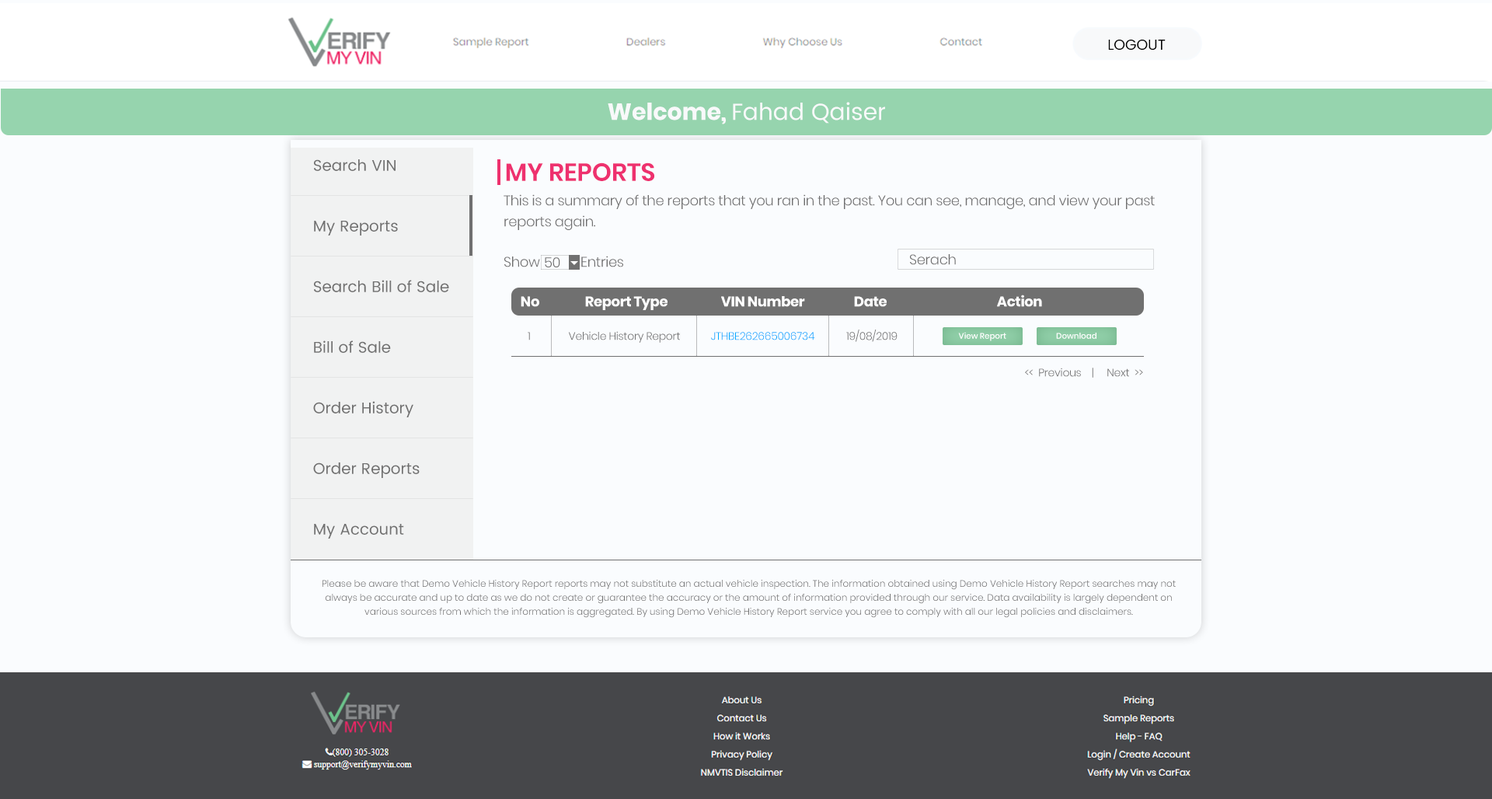
<style>
.page{position:relative;width:1492px;height:799px;background:#fafcfe}
.page>*{position:absolute;margin:0}
.t1{font:14.6px "Poppins-Regular";color:#000000}
.t2{font:23.3px "Poppins-Regular";color:#f8f9fa}
.t3{font:23.3px "Poppins";color:#f8f9fa}
.t4{font:15.5px "Poppins-Regular";color:#707070}
.t5{font:24.9px "Poppins-SemiBold";color:#ee316e}
.t6{font:14px/21px "Poppins-Light";letter-spacing:-0.02em;color:#707070}
.t7{font:14px "Poppins-Light";letter-spacing:-0.02em;color:#707070}
.t8{font:14px "Poppins";letter-spacing:-0.02em;color:#ffffff}
.t9{font:10.9px "Poppins-Light";letter-spacing:-0.02em;color:#707070}
.t10{font:10.9px "Poppins-Light";letter-spacing:-0.02em}
.t11{font:10.9px "Poppins-Light";letter-spacing:-0.02em;color:#00a8ff}
.t12{font:8.1px "Poppins-Medium";color:#ffffff}
.t13{font:9.3px/14px "Poppins-Light";color:#707070}
</style>
<div class="page">
<p class="t1" style="left:1108px;top:39px;width:58px;height:12px">LOGOUT</p>
<p class="t2" style="left:608px;top:102px;width:277px;height:22px"><span class="t3">Welcome, </span>Fahad Qaiser</p>
<p class="t4" style="left:314px;top:159px;width:82px;height:12px">Search VIN</p>
<p class="t5" style="left:506px;top:162px;width:148px;height:19px">MY REPORTS</p>
<p class="t6" style="left:504px;top:194px;width:651px;height:36px">This is a summary of the reports that you ran in the past. You can see, manage, and view your past reports again.</p>
<p class="t4" style="left:314px;top:221px;width:84px;height:15px">My Reports</p>
<p class="t7" style="left:504px;top:256px;width:119px;height:11px">Show             Entries</p>
<p class="t7" style="left:545px;top:257px;width:15px;height:10px">50</p>
<p class="t7" style="left:910px;top:254px;width:46px;height:11px">Serach</p>
<p class="t4" style="left:314px;top:280px;width:135px;height:12px">Search Bill of Sale</p>
<p class="t8" style="left:521px;top:296px;width:18px;height:11px">No</p>
<p class="t8" style="left:585px;top:296px;width:83px;height:14px">Report Type</p>
<p class="t8" style="left:721px;top:296px;width:84px;height:11px">VIN Number</p>
<p class="t8" style="left:854px;top:296px;width:33px;height:11px">Date</p>
<p class="t8" style="left:997px;top:295px;width:45px;height:12px">Action</p>
<p class="t9" style="left:846px;top:330px;width:52px;height:12px">19/08/2019</p>
<p class="t4" style="left:314px;top:340px;width:77px;height:13px">Bill of Sale</p>
<p class="t10" style="left:528px;top:332px;width:2px;height:8px">1</p>
<p class="t9" style="left:569px;top:331px;width:111px;height:12px">Vehicle History Report</p>
<p class="t11" style="left:711px;top:332px;width:104px;height:8px">JTHBE262665006734</p>
<p class="t12" style="left:958px;top:332px;width:49px;height:9px">View Report</p>
<p class="t12" style="left:1056px;top:333px;width:41px;height:6px">Download</p>
<p class="t9" style="left:1025px;top:368px;width:118px;height:10px">&lt;&lt;  Previous    |     Next  &gt;&gt;</p>
<p class="t4" style="left:313px;top:401px;width:101px;height:16px">Order History</p>
<p class="t4" style="left:313px;top:462px;width:107px;height:16px">Order Reports</p>
<p class="t4" style="left:314px;top:524px;width:90px;height:15px">My Account</p>
<p class="t13" style="left:323px;top:580px;width:853px;height:38px;text-align:center">Please be aware that Demo Vehicle History Report reports may not substitute an actual vehicle inspection. The information obtained using Demo Vehicle History Report searches may not always be accurate and up to date as we do not create or guarantee the accuracy or the amount of information provided through our service. Data availability is largely dependent on various sources from which the information is aggregated. By using Demo Vehicle History Report service you agree to comply with all our legal policies and disclaimers.</p>
</div>
